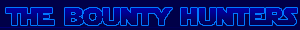
<style>
.page{position:relative;width:300px;height:30px;background:#000048}
.page>*{position:absolute;margin:0}
.t1{font:24px "StarJedi"}
.t2{font:24px "StarJedi";letter-spacing:0.1em}
</style>
<div class="page">
<p class="t1" style="left:6px;top:8px;width:291px;height:17px">ThE bountY <span class="t2">h</span>uNters</p>
</div>
